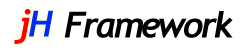
<style>
.page{position:relative;width:246px;height:52px;background:#ffffff}
.page>*{position:absolute;margin:0}
.t1{font:36px "Trebuchet-BoldItalic";letter-spacing:-0.08em;color:#ff0000}
.t2{font:36px "Trebuchet-BoldItalic";letter-spacing:-0.08em;color:#002aff}
.t3{font:36px "Trebuchet-BoldItalic";letter-spacing:-0.08em;color:#000000}
</style>
<div class="page">
<p class="t1" style="left:14px;top:9px;width:39px;height:35px">j<span class="t2">H</span></p>
<p class="t3" style="left:64px;top:11px;width:169px;height:27px">Framework</p>
</div>
